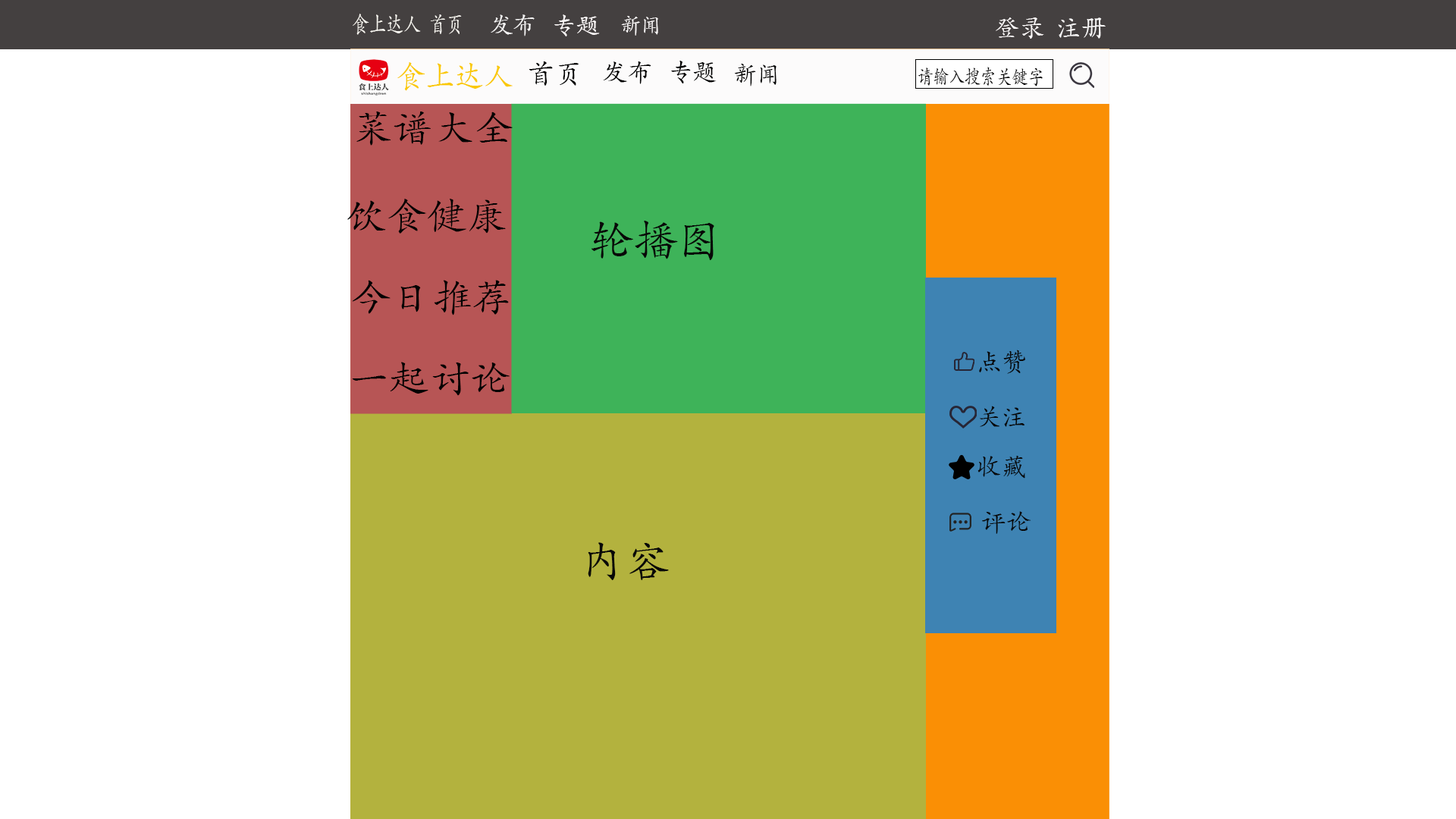
<style>
.page{position:relative;width:1456px;height:819px;background:#ffffff}
.page>*{position:absolute;margin:0}
.t1{font:23.3px "STKaiti";color:#f7f5ef;scale:0.74 1}
.t2{font:23.3px "STKaiti";color:#f4f3f3}
.t3{font:23.9px "STKaiti";color:#fbf7f7}
.t4{font:22px "STKaiti";color:#fefbfb;scale:0.93 1}
.t5{font:25.3px "STKaiti";color:#fcf8f8}
.t6{font:25.3px "STKaiti";color:#f8f7f7}
.t7{font:31.6px "STKaiti";color:#fac904;scale:0.93 1}
.t8{font:28.5px "STKaiti";color:#030303}
.t9{font:24.6px "STKaiti";color:#030303;scale:1.04 1}
.t10{font:25.5px "STKaiti";color:#030303;scale:0.94 1}
.t11{font:25.1px "STKaiti";color:#030303;scale:0.93 1}
.t12{font:19.9px "STKaiti";color:#060606;scale:0.8 1}
.t13{font:38.6px "STKaiti";color:#030303;scale:1.04 1}
.t14{font:44.2px "STKaiti";color:#080808}
.t15{font:25.3px "STKaiti";color:#080808}
</style>
<div class="page">
<p class="t1" style="left:353px;top:14px;width:109px;height:21px">食上达人  首页</p>
<p class="t2" style="left:491px;top:14px;width:44px;height:22px">发布</p>
<p class="t3" style="left:554px;top:14px;width:46px;height:22px">专题</p>
<p class="t4" style="left:621px;top:16px;width:37px;height:20px">新闻</p>
<p class="t5" style="left:996px;top:17px;width:48px;height:22px">登录</p>
<p class="t6" style="left:1058px;top:17px;width:48px;height:22px">注册</p>
<p class="t7" style="left:397px;top:62px;width:116px;height:29px">食上达人</p>
<p class="t8" style="left:529px;top:61px;width:50px;height:25px">首页</p>
<p class="t9" style="left:603px;top:61px;width:48px;height:23px">发布</p>
<p class="t10" style="left:671px;top:61px;width:46px;height:22px">专题</p>
<p class="t11" style="left:734px;top:64px;width:43px;height:22px">新闻</p>
<p class="t12" style="left:918px;top:67px;width:125px;height:19px">请输入搜索关键字</p>
<p class="t13" style="left:356px;top:111px;width:157px;height:35px">菜谱大全</p>
<p class="t13" style="left:347px;top:199px;width:159px;height:35px">饮食健康</p>
<p class="t14" style="left:591px;top:221px;width:123px;height:39px">轮播图</p>
<p class="t13" style="left:352px;top:280px;width:157px;height:35px">今日推荐</p>
<p class="t15" style="left:979px;top:350px;width:46px;height:24px">点赞</p>
<p class="t13" style="left:352px;top:362px;width:158px;height:34px">一起讨论</p>
<p class="t15" style="left:980px;top:406px;width:44px;height:21px">关注</p>
<p class="t15" style="left:977px;top:456px;width:48px;height:23px">收藏</p>
<p class="t15" style="left:982px;top:511px;width:49px;height:23px">评论</p>
<p class="t14" style="left:588px;top:542px;width:81px;height:38px">内容</p>
</div>
